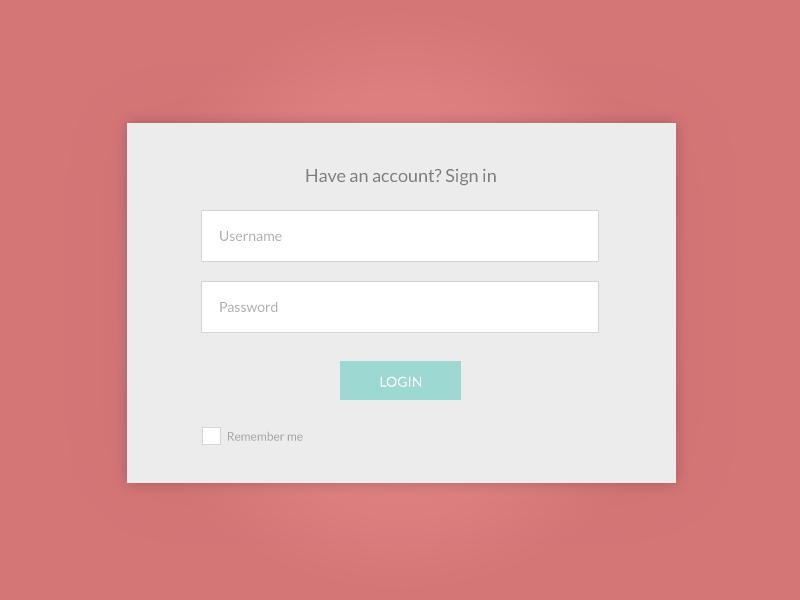
<style>
.page{position:relative;width:800px;height:600px;background:#ececec}
.page>*{position:absolute;margin:0}
.t1{font:18px "Lato-Regular";color:#7e7e7e}
.t2{font:14px "Lato-Regular";color:#afafaf}
.t3{font:14px "Lato-Regular";color:#ffffff}
.t4{font:12px "Lato-Regular";color:#a3a3a3}
</style>
<div class="page">
<p class="t1" style="left:306px;top:168px;width:190px;height:18px">Have an account? Sign in</p>
<p class="t2" style="left:220px;top:231px;width:62px;height:10px">Username</p>
<p class="t2" style="left:220px;top:301px;width:58px;height:11px">Password</p>
<p class="t3" style="left:380px;top:376px;width:41px;height:11px">LOGIN</p>
<p class="t4" style="left:228px;top:431px;width:75px;height:10px">Remember me</p>
</div>
